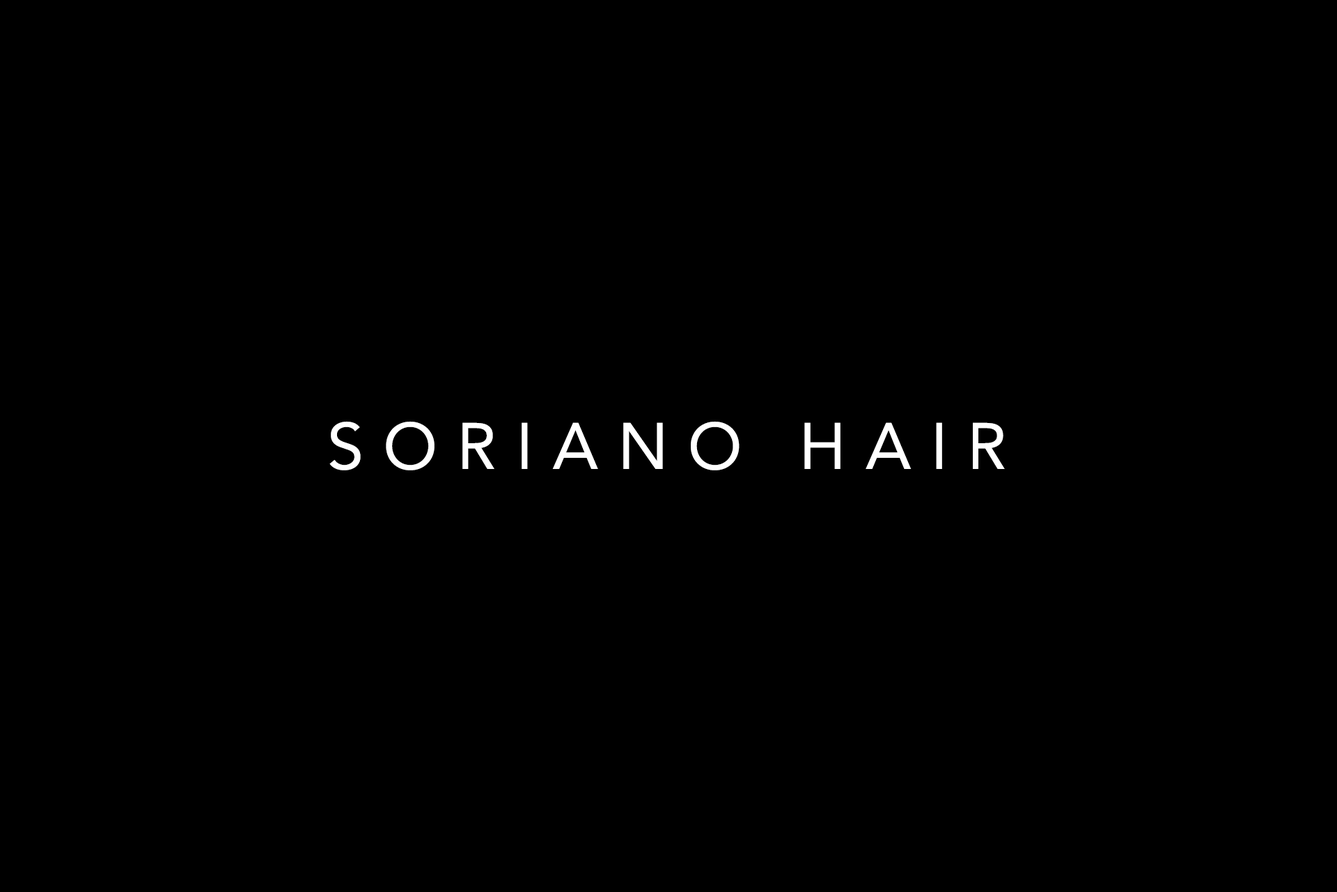
<style>
.page{position:relative;width:1337px;height:892px;background:#000000}
.page>*{position:absolute;margin:0}
.t1{font:65px "Avenir-Roman";letter-spacing:0.3em;color:#ffffff;text-transform:uppercase}
</style>
<div class="page">
<p class="t1" style="left:329px;top:421px;width:676px;height:49px">SORIANO HAIR</p>
</div>
